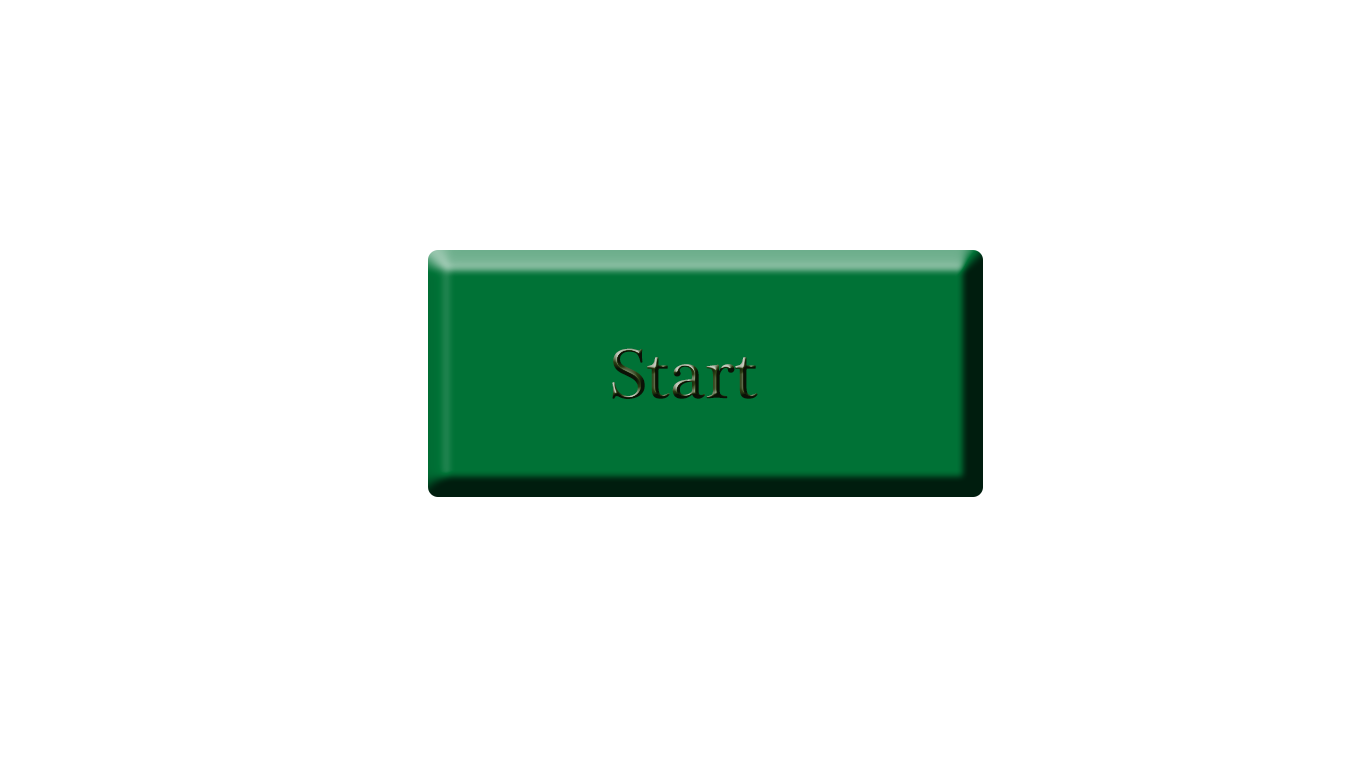
<style>
.page{position:relative;width:1366px;height:768px;background:#ffffff}
.page>*{position:absolute;margin:0}
.t1{font:72px "PlantagenetCherokee"}
.t2{font:60px "MyriadPro-Semibold"}
</style>
<div class="page">
<p class="t1" style="left:612px;top:348px;width:146px;height:51px"><span class="t2"><br></span>Start <br><span class="t2">Start</span></p>
</div>
